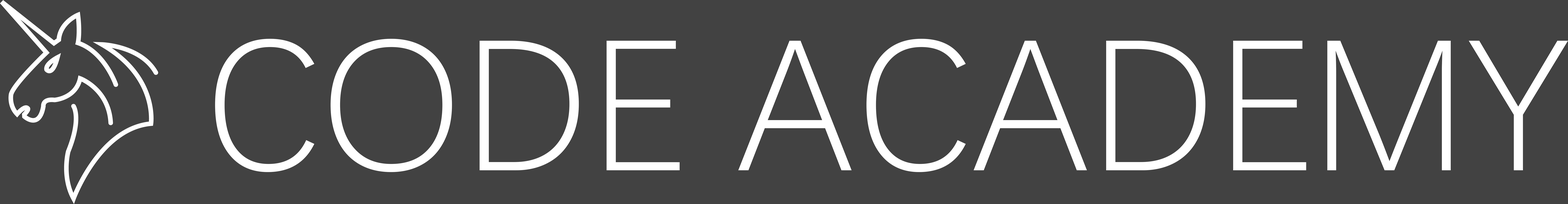
<style>
.page{position:relative;width:1568px;height:204px;background:#424242}
.page>*{position:absolute;margin:0}
.t1{font:188.3px "DengXian-Light";color:#ffffff}
</style>
<div class="page">
<p class="t1" style="left:215px;top:39px;width:1353px;height:133px">CODE ACADEMY</p>
</div>
